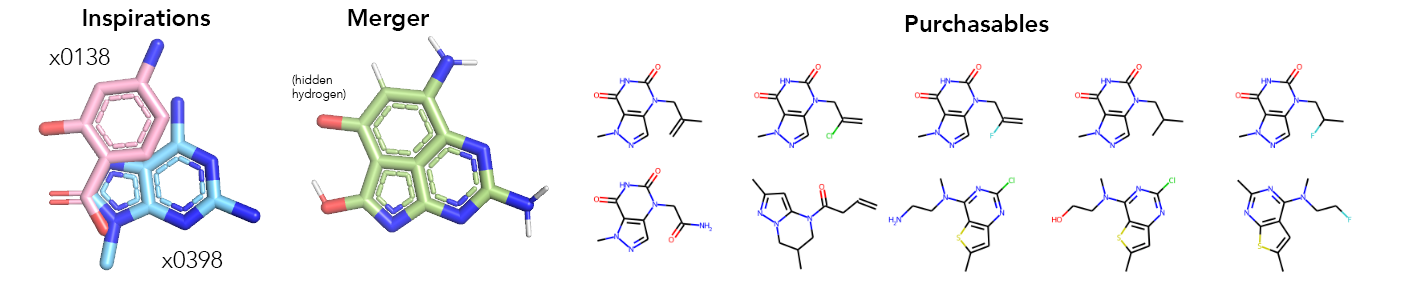
<style>
.page{position:relative;width:1421px;height:307px;background:#ffffff}
.page>*{position:absolute;margin:0}
.t1{font:24px "Avenir-Heavy";color:#000000}
.t2{font:24px "Avenir-Light";color:#000000}
.t3{font:12px "Avenir-Light";color:#000000}
</style>
<div class="page">
<p class="t1" style="left:83px;top:9px;width:127px;height:22px">Inspirations</p>
<p class="t1" style="left:348px;top:9px;width:81px;height:22px">Merger</p>
<p class="t1" style="left:905px;top:14px;width:144px;height:18px">Purchasables</p>
<p class="t2" style="left:49px;top:48px;width:61px;height:17px">x0138</p>
<p class="t3" style="left:292px;top:74px;width:54px;height:27px">(hidden<br>hydrogen)</p>
<p class="t2" style="left:161px;top:251px;width:62px;height:17px">x0398</p>
</div>
